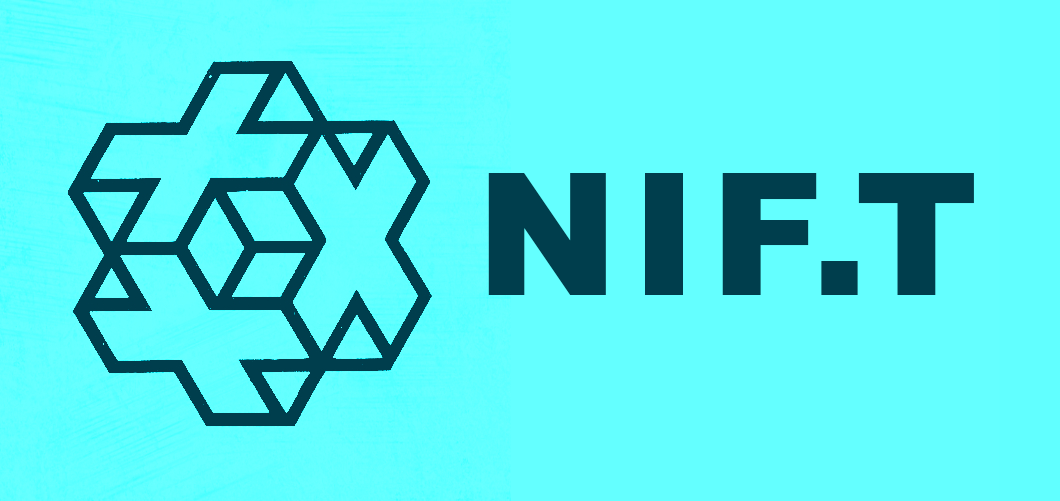
<style>
.page{position:relative;width:1060px;height:501px;background:#64ffff}
.page>*{position:absolute;margin:0}
.t1{font:170.8px "Arial-Black";letter-spacing:-0.075em;color:#003e4d}
.t2{font:170.8px "Arial-Black";letter-spacing:0.075em;color:#003e4d}
</style>
<div class="page">
<p class="t1" style="left:488px;top:173px;width:486px;height:122px"><span class="t2">NI</span>F.T</p>
</div>
